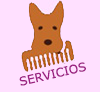
<style>
.page{position:relative;width:100px;height:92px;background:#ffe0ff}
.page>*{position:absolute;margin:0}
.t1{font:12px "Verdana";color:#9c2082}
</style>
<div class="page">
<p class="t1" style="left:19px;top:62px;width:67px;height:24px;rotate:-13deg">SERVICIOS</p>
</div>
